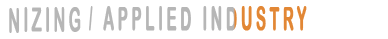
<style>
.page{position:relative;width:388px;height:39px;background:#ffffff}
.page>*{position:absolute;margin:0}
.t1{font:33px "ArialRoundedMTBold";color:#b5b5b5;font-weight:bold;scale:0.33 1}
.t2{font:33px "ArialRoundedMTBold";letter-spacing:0.2em;font-weight:bold;scale:0.47 1}
.t3{font:33px "ArialRoundedMTBold";letter-spacing:0.2em;color:#b6b6b6;font-weight:bold;scale:0.47 1}
</style>
<div class="page">
<p class="t1" style="left:89px;top:6px;width:4px;height:25px">/</p>
<p class="t2" style="left:103px;top:6px;width:204px;height:25px">APPLIED INDUSTRY</p>
<p class="t3" style="left:9px;top:7px;width:72px;height:26px">NIZING</p>
</div>
